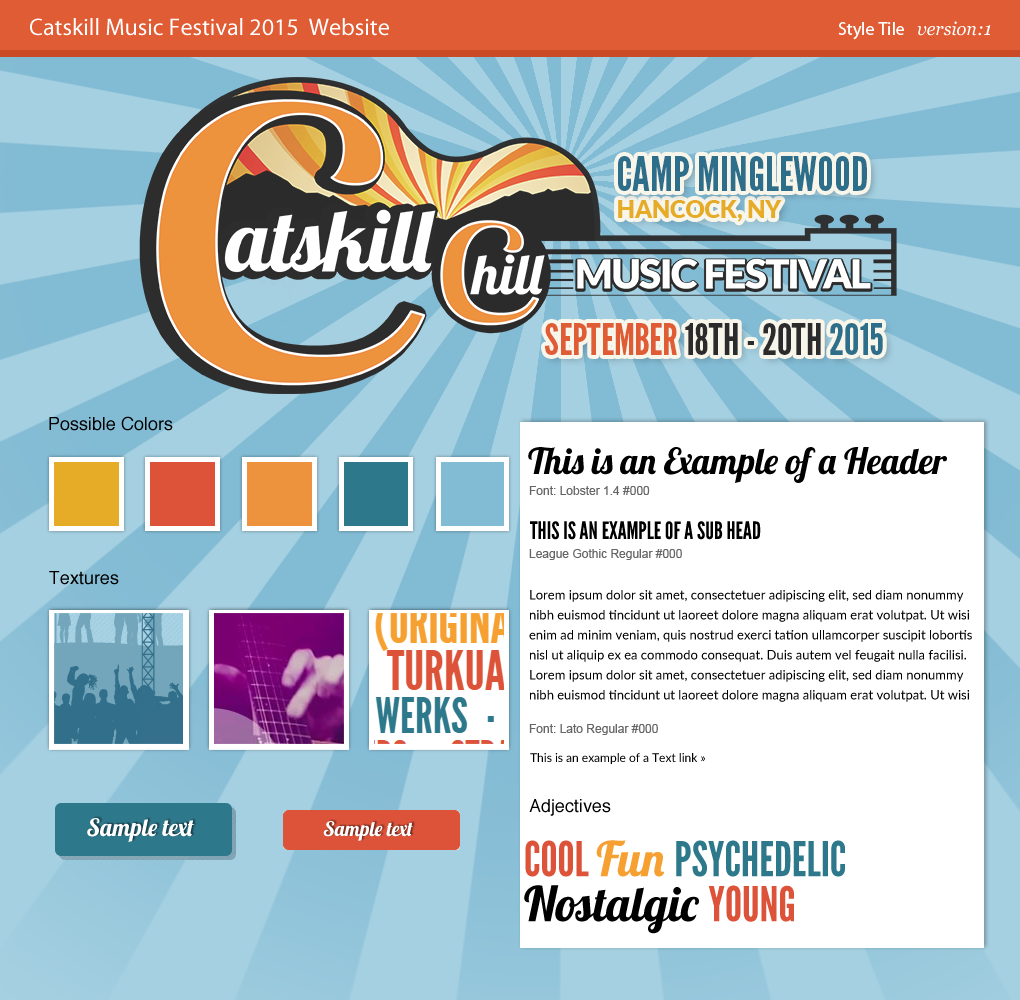
<style>
.page{position:relative;width:1020px;height:1000px;background:#ffffff}
.page>*{position:absolute;margin:0}
.t1{font:24px "MyriadPro-Regular";color:#ffffff}
.t2{font:18px "MyriadPro-Regular";color:#ffffff}
.t3{font:18px "Georgia-Italic";color:#ffffff}
.t4{font:18px "Helvetica";color:#000000}
.t5{font:36px "Lobster1.4";color:#000000}
.t6{font:12px "ArialMT";color:#666666}
.t7{font:24px "LeagueGothic-Regular";color:#000000;text-transform:uppercase}
.t8{font:13px/20px "Lato-Regular";color:#000000}
.t9{font:12px "Lato-Regular";color:#000000}
.t10{font:24px "Lobster1.4";color:#ffffff}
.t11{font:20px "Lobster1.4";color:#ffffff}
.t12{font:48px/45px "LeagueGothic-Regular";color:#2d788b;text-transform:uppercase}
.t13{font:48px/45px "LeagueGothic-Regular";color:#dd5339;text-transform:uppercase}
.t14{font:48px/45px "Lobster1.4";color:#f6a031}
.t15{font:48px/45px "Lobster1.4";color:#000000}
</style>
<div class="page">
<p class="t1" style="left:30px;top:18px;width:359px;height:18px">Catskill Music Festival 2015  Website</p>
<p class="t2" style="left:838px;top:22px;width:66px;height:18px">Style Tile</p>
<p class="t3" style="left:917px;top:21px;width:74px;height:15px">version:1</p>
<p class="t4" style="left:49px;top:416px;width:124px;height:15px">Possible Colors</p>
<p class="t5" style="left:528px;top:447px;width:419px;height:36px">This is an Example of a Header</p>
<p class="t6" style="left:529px;top:486px;width:121px;height:9px">Font: Lobster 1.4 #000</p>
<p class="t7" style="left:530px;top:521px;width:231px;height:19px">This is an Example of a Sub Head</p>
<p class="t6" style="left:529px;top:549px;width:153px;height:11px">League Gothic Regular #000</p>
<p class="t4" style="left:49px;top:571px;width:70px;height:14px">Textures</p>
<p class="t8" style="left:529px;top:590px;width:443px;height:112px">Lorem ipsum dolor sit amet, consectetuer adipiscing elit, sed diam nonummy nibh euismod tincidunt ut laoreet dolore magna aliquam erat volutpat. Ut wisi enim ad minim veniam, quis nostrud exerci tation ullamcorper suscipit lobortis nisl ut aliquip ex ea commodo consequat. Duis autem vel feugait nulla facilisi. Lorem ipsum dolor sit amet, consectetuer adipiscing elit, sed diam nonummy nibh euismod tincidunt ut laoreet dolore magna aliquam erat volutpat. Ut wisi</p>
<p class="t6" style="left:529px;top:724px;width:129px;height:11px">Font: Lato Regular #000</p>
<p class="t9" style="left:530px;top:753px;width:175px;height:11px">This is an example of a Text link »</p>
<p class="t4" style="left:529px;top:799px;width:82px;height:17px">Adjectives</p>
<p class="t10" style="left:87px;top:818px;width:107px;height:24px">Sample text</p>
<p class="t11" style="left:323px;top:821px;width:90px;height:20px">Sample text</p>
<p class="t12" style="left:524px;top:840px;width:321px;height:94px"><span class="t13">COOL </span><span class="t14">Fun </span>psychedelic<br><span class="t15">Nostalgic </span><span class="t13">Young</span></p>
</div>
